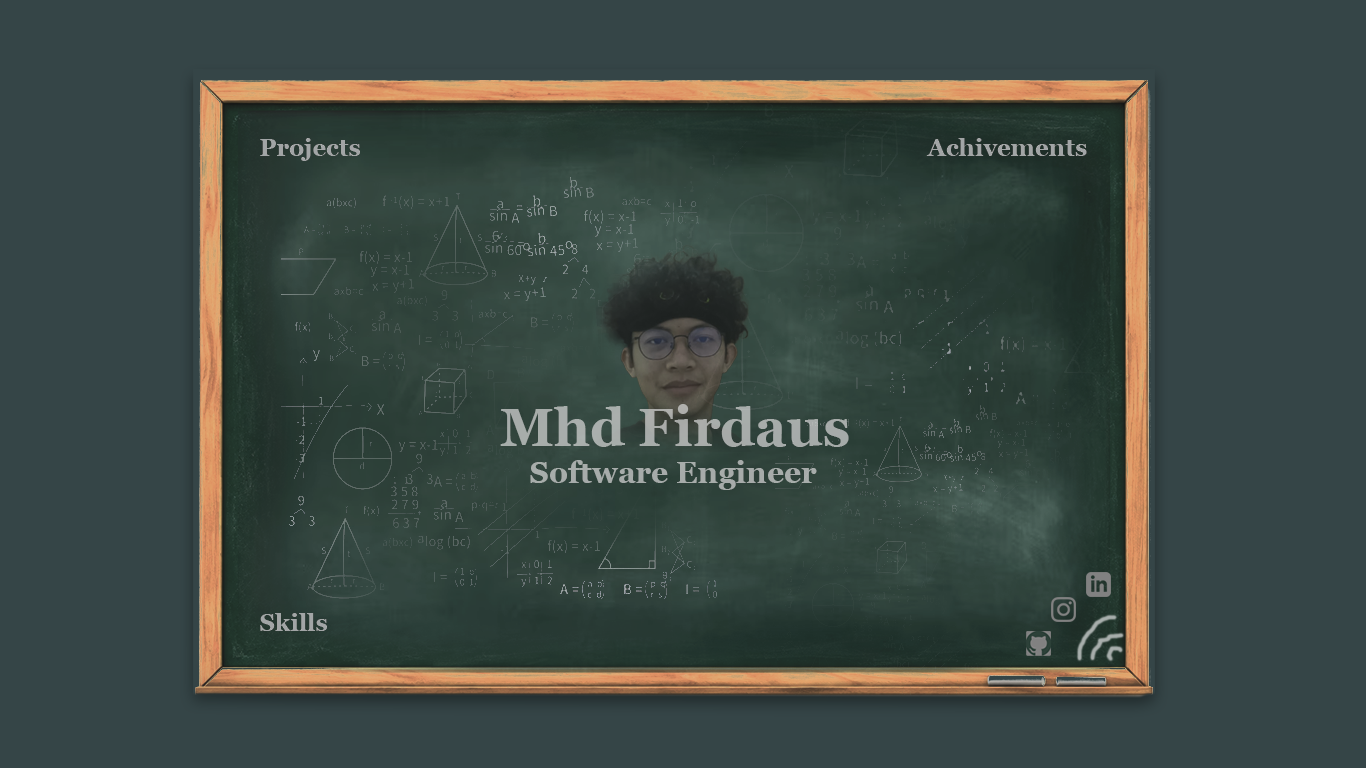
<style>
.page{position:relative;width:1366px;height:768px;background:#354547}
.page>*{position:absolute;margin:0}
.t1{font:24px "Georgia-Bold";color:#a2a5a6}
.t2{font:53px "Georgia-Bold";color:#a7adaa}
.t3{font:30px "Georgia-Bold";color:#a7acaa}
</style>
<div class="page">
<p class="t1" style="left:260px;top:138px;width:100px;height:23px">Projects</p>
<p class="t1" style="left:926px;top:138px;width:161px;height:18px">Achivements</p>
<p class="t2" style="left:500px;top:404px;width:349px;height:43px">Mhd Firdaus</p>
<p class="t3" style="left:530px;top:460px;width:287px;height:30px">Software Engineer</p>
<p class="t1" style="left:260px;top:613px;width:67px;height:18px">Skills</p>
</div>
